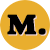
<style>
.page{position:relative;width:50px;height:50px;background:#e9ae2e}
.page>*{position:absolute;margin:0}
.t1{font:29.1px "GoudyHeavyfaceBT-Regular";color:#000000;font-weight:bold}
</style>
<div class="page">
<p class="t1" style="left:7px;top:14px;width:39px;height:21px">M.</p>
<p class="t1" style="left:8px;top:15px;width:39px;height:21px">M.</p>
</div>
